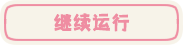
<style>
.page{position:relative;width:183px;height:45px;background:#f7f3e9}
.page>*{position:absolute;margin:0}
.t1{font:12px "shetumodengxiaofangti";color:#ef8da2;font-weight:bold;scale:0.94 1}
</style>
<div class="page">
<p class="t1" style="left:54px;top:13px;width:76px;height:19px">继续运行</p>
</div>
